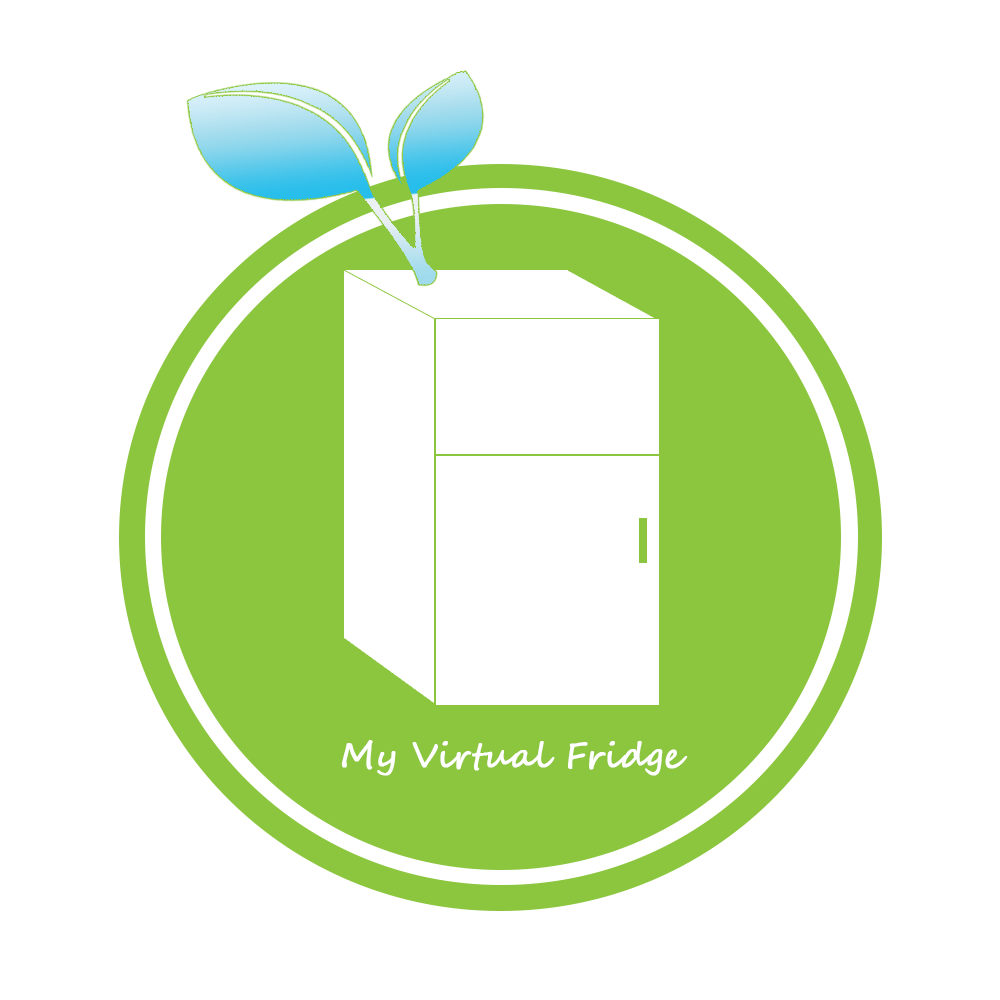
<style>
.page{position:relative;width:1000px;height:1000px;background:#ffffff}
.page>*{position:absolute;margin:0}
.t1{font:34px "SegoeScript";color:#ffffff;font-weight:bold}
</style>
<div class="page">
<p class="t1" style="left:341px;top:740px;width:347px;height:36px">My Virtual Fridge</p>
</div>
